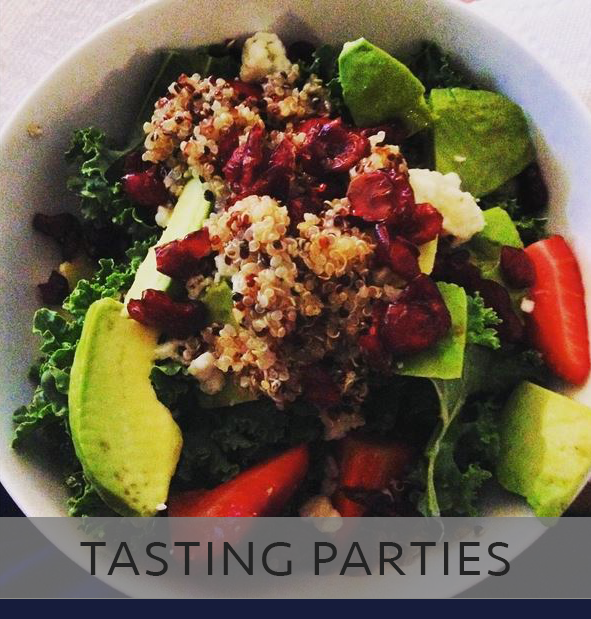
<style>
.page{position:relative;width:591px;height:619px}
.page>*{position:absolute;margin:0}
.t1{font:64px "Seravek-Light";color:#232323;font-variant:small-caps}
</style>
<div class="page">
<p class="t1" style="left:80px;top:542px;width:430px;height:34px">tasting parties</p>
</div>
